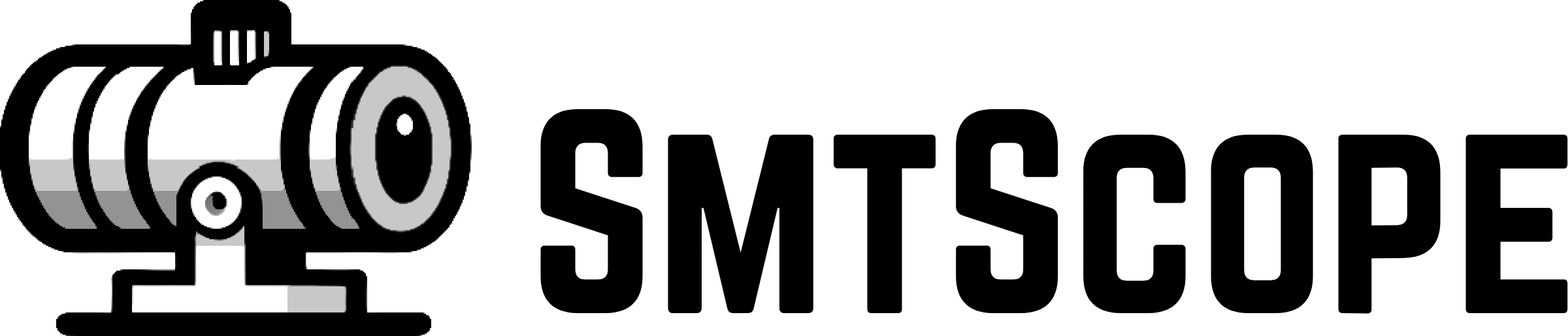
<style>
.page{position:relative;width:1568px;height:336px;background:#ffffff}
.page>*{position:absolute;margin:0}
.t1{font:254.8px "Norwester-Regular";color:#000000}
</style>
<div class="page">
<p class="t1" style="left:540px;top:109px;width:1028px;height:205px">SmtScope</p>
</div>
